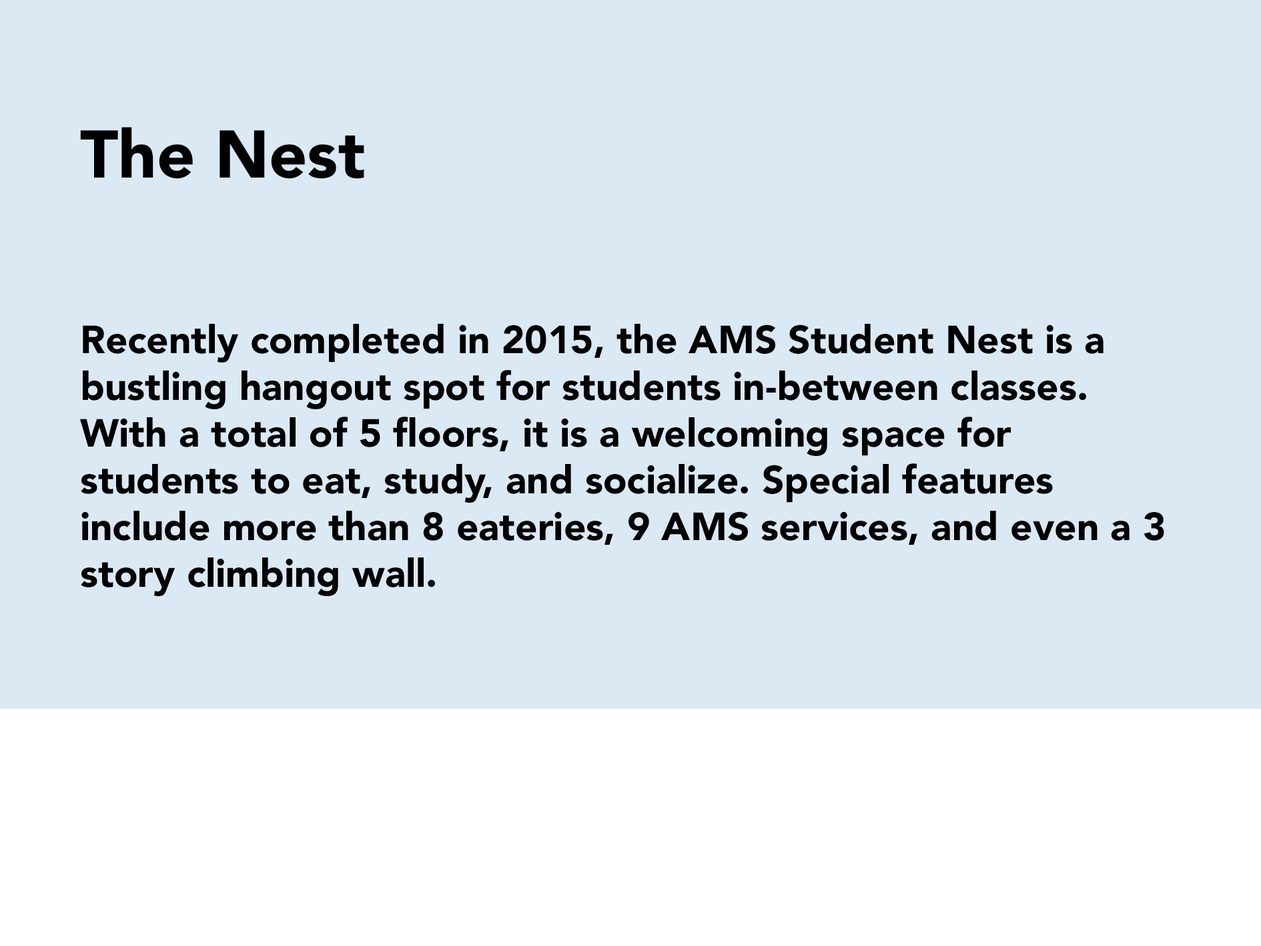
<style>
.page{position:relative;width:1261px;height:946px;background:#dbe9f5}
.page>*{position:absolute;margin:0}
.t1{font:66.7px "Avenir-Black";color:#000000}
.t2{font:38.9px "Avenir-Black";color:#000000}
</style>
<div class="page">
<p class="t1" style="left:80px;top:127px;width:284px;height:52px">The Nest</p>
<p class="t2" style="left:80px;top:324px;width:1084px;height:272px">Recently completed in 2015, the AMS Student Nest is a bustling hangout spot for students in-between classes. With a total of 5 floors, it is a welcoming space for students to eat, study, and socialize. Special features include more than 8 eateries, 9 AMS services, and even a 3 story climbing wall.</p>
</div>
